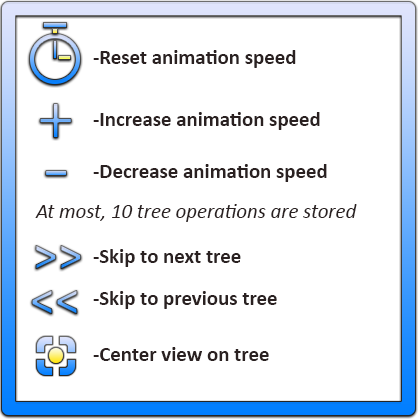
<style>
.page{position:relative;width:418px;height:419px;background:#ffffff}
.page>*{position:absolute;margin:0}
.t1{font:20.8px "Calibri-Bold";color:#2a2121}
.t2{font:75px "Calibri"}
.t3{font:20.8px "Calibri-Italic";color:#2a2121}
.t4{font:50px "Calibri-Bold"}
</style>
<div class="page">
<p class="t1" style="left:93px;top:50px;width:203px;height:18px">-Reset animation speed</p>
<p class="t2" style="left:39px;top:103px;width:33px;height:35px">+</p>
<p class="t1" style="left:93px;top:112px;width:227px;height:18px">-Increase animation speed</p>
<p class="t1" style="left:93px;top:164px;width:234px;height:18px">-Decrease animation speed</p>
<p class="t3" style="left:35px;top:204px;width:322px;height:18px">At most, 10 tree operations are stored</p>
<p class="t4" style="left:35px;top:245px;width:47px;height:24px">&gt;&gt;</p>
<p class="t1" style="left:93px;top:249px;width:148px;height:18px">-Skip to next tree</p>
<p class="t4" style="left:31px;top:290px;width:47px;height:24px">&lt;&lt;</p>
<p class="t1" style="left:93px;top:291px;width:184px;height:18px">-Skip to previous tree</p>
<p class="t1" style="left:93px;top:347px;width:176px;height:14px">-Center view on tree</p>
</div>
